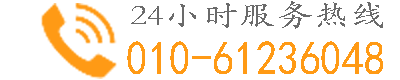
<style>
.page{position:relative;width:400px;height:80px;background:#ffffff}
.page>*{position:absolute;margin:0}
.t1{font:30px "STKaiti";color:#6a6a6a;scale:1.22 1}
.t2{font:48px "SimHei";color:#ff9a15;scale:0.9 1}
</style>
<div class="page">
<p class="t1" style="left:131px;top:1px;width:252px;height:28px">24小时服务热线</p>
<p class="t2" style="left:127px;top:41px;width:256px;height:33px">010-61236048</p>
</div>
